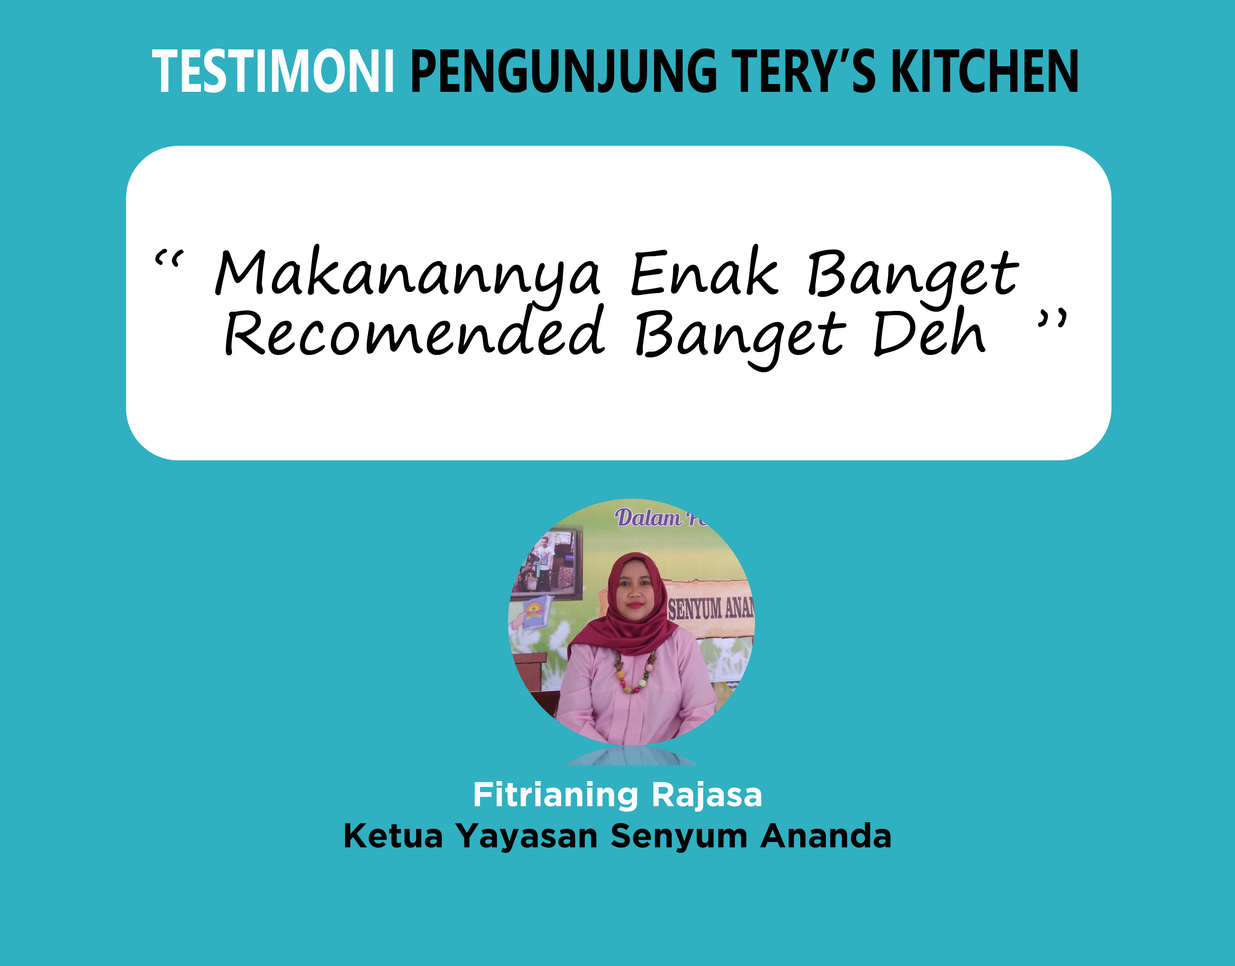
<style>
.page{position:relative;width:1235px;height:966px;background:#30b0c1}
.page>*{position:absolute;margin:0}
.t1{font:60.4px "SegoeUI-Bold";color:#000000;scale:0.75 1}
.t2{font:60.4px "SegoeUI-Bold";color:#ffffff;scale:0.75 1}
.t3{font:60.4px/60.4px "SegoePrint";color:#000000}
</style>
<div class="page">
<p class="t1" style="left:152px;top:49px;width:926px;height:44px"><span class="t2">TESTIMONI</span> PENGUNJUNG TERY’S KITCHEN</p>
<p class="t3" style="left:155px;top:244px;width:911px;height:128px;text-align:center">“ Makanannya Enak Banget <br>    Recomended Banget Deh  ”</p>
</div>
